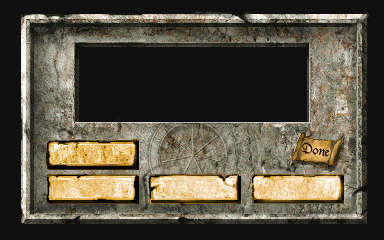
<style>
.page{position:relative;width:384px;height:240px;background:#101010}
.page>*{position:absolute;margin:0}
.t1{font:13.3px "DucDeBerry";color:#000000}
</style>
<div class="page">
<p class="t1" style="left:302px;top:143px;width:28px;height:14px;rotate:11deg">Done</p>
</div>
